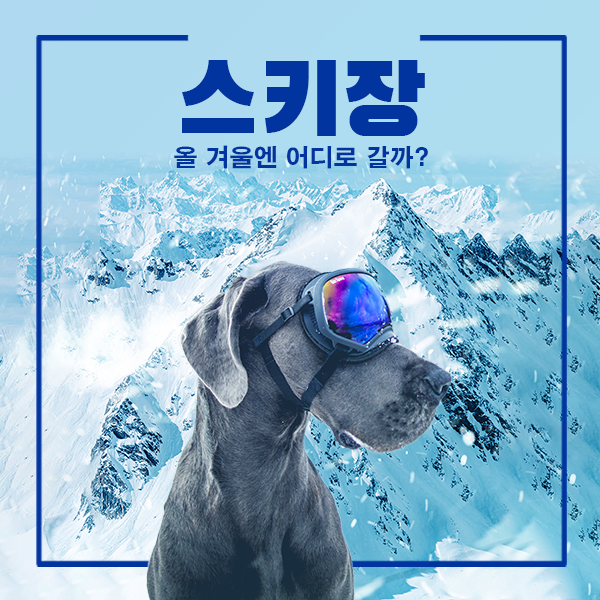
<style>
.page{position:relative;width:600px;height:600px}
.page>*{position:absolute;margin:0}
.t1{font:100px "BlackHanSans-Regular";color:#01349e}
.t2{font:24px "H2gtrE";color:#01349e}
</style>
<div class="page">
<p class="t1" style="left:182px;top:60px;width:243px;height:76px">스키장</p>
<p class="t2" style="left:174px;top:145px;width:254px;height:24px">올 겨울엔 어디로 갈까?</p>
</div>
